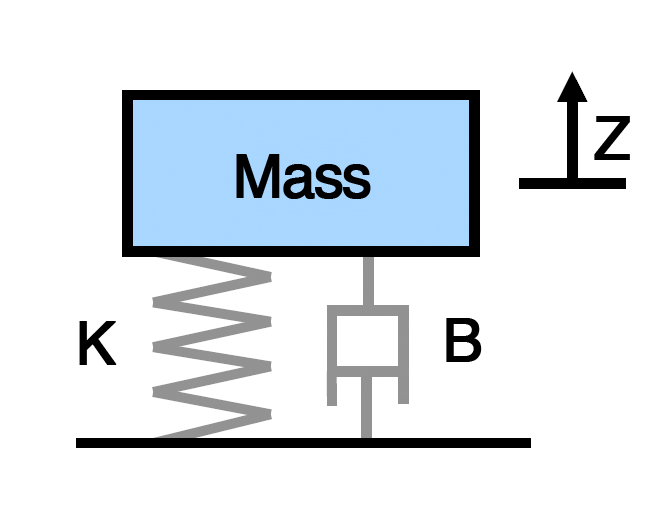
<style>
.page{position:relative;width:663px;height:516px;background:#ffffff}
.page>*{position:absolute;margin:0}
.t1{font:60px "Helvetica";letter-spacing:-0.05em;color:#000000;font-weight:bold}
</style>
<div class="page">
<p class="t1" style="left:594px;top:116px;width:36px;height:44px">Z</p>
<p class="t1" style="left:236px;top:154px;width:135px;height:45px">Mass</p>
<p class="t1" style="left:446px;top:318px;width:36px;height:44px">B</p>
<p class="t1" style="left:79px;top:321px;width:38px;height:44px">K</p>
</div>
